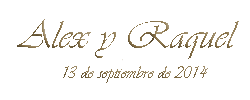
<style>
.page{position:relative;width:250px;height:100px;background:#ffffff}
.page>*{position:absolute;margin:0}
.t1{font:39.7px "Vivaldii";letter-spacing:0.01em;color:#8b754b}
.t2{font:18px "Vivaldii";letter-spacing:0.01em;color:#8b754b}
</style>
<div class="page">
<p class="t1" style="left:17px;top:19px;width:222px;height:40px">Alex y Raquel</p>
<p class="t2" style="left:63px;top:66px;width:145px;height:17px">13 de septiembre de 2014</p>
</div>
